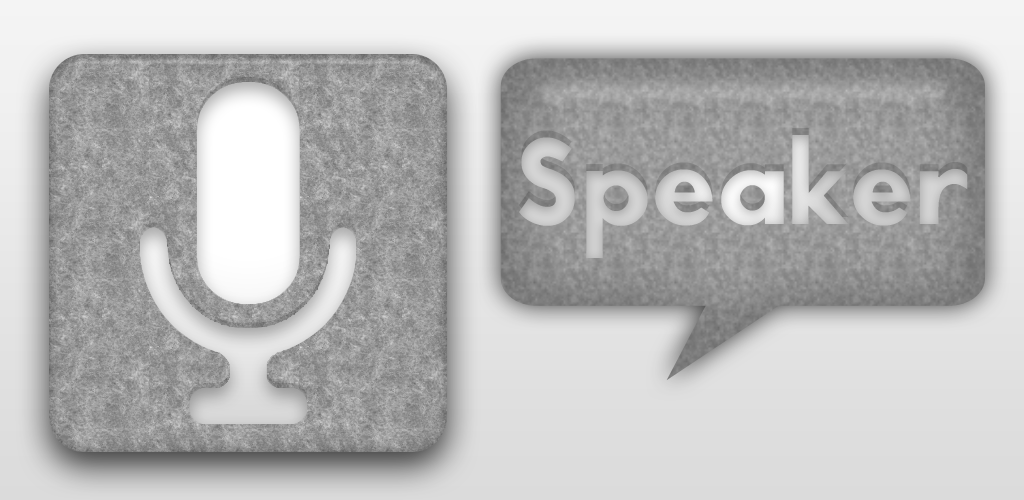
<style>
.page{position:relative;width:1024px;height:500px}
.page>*{position:absolute;margin:0}
.t1{font:120px "MonodBrun";color:#cecece}
</style>
<div class="page">
<p class="t1" style="left:519px;top:135px;width:449px;height:123px">Speaker</p>
</div>
